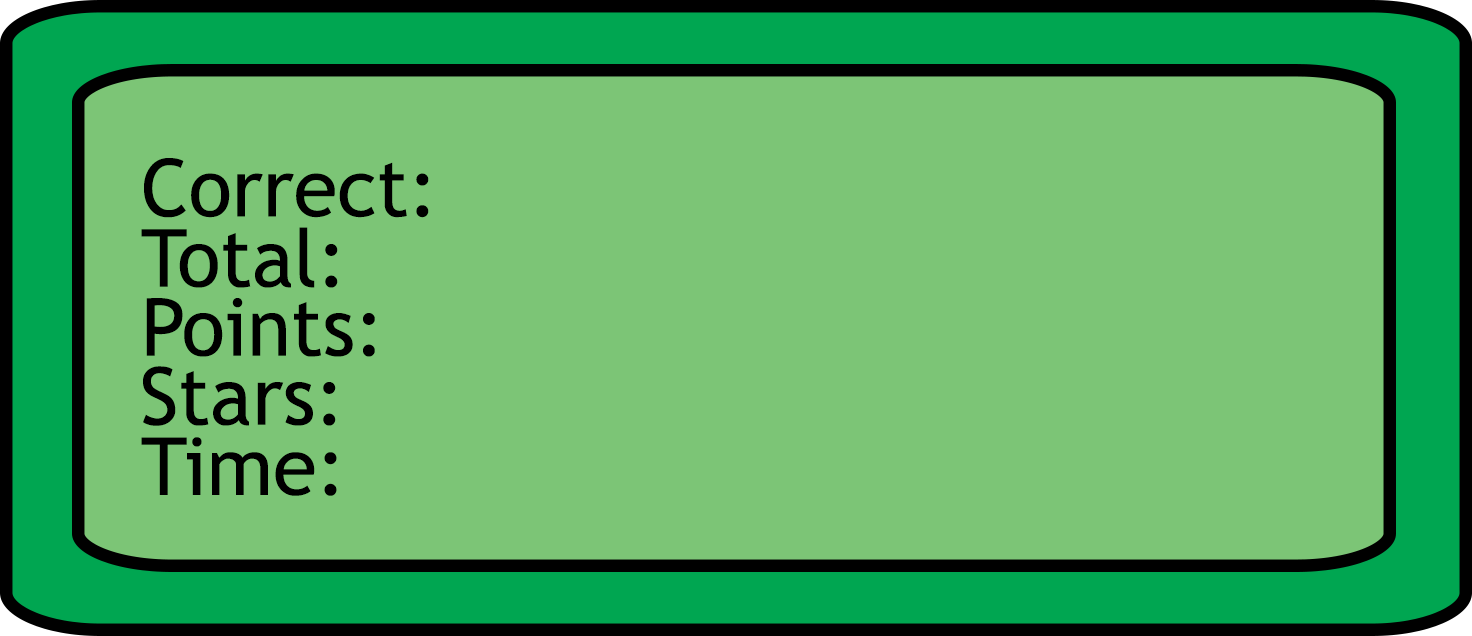
<style>
.page{position:relative;width:1472px;height:636px;background:#7cc576}
.page>*{position:absolute;margin:0}
.t1{font:80px "TrebuchetMS";color:#000000}
</style>
<div class="page">
<p class="t1" style="left:144px;top:158px;width:285px;height:60px">Correct:</p>
<p class="t1" style="left:141px;top:227px;width:197px;height:61px">Total:</p>
<p class="t1" style="left:146px;top:298px;width:229px;height:59px">Points:</p>
<p class="t1" style="left:143px;top:366px;width:193px;height:60px">Stars:</p>
<p class="t1" style="left:141px;top:437px;width:196px;height:59px">Time:</p>
</div>
